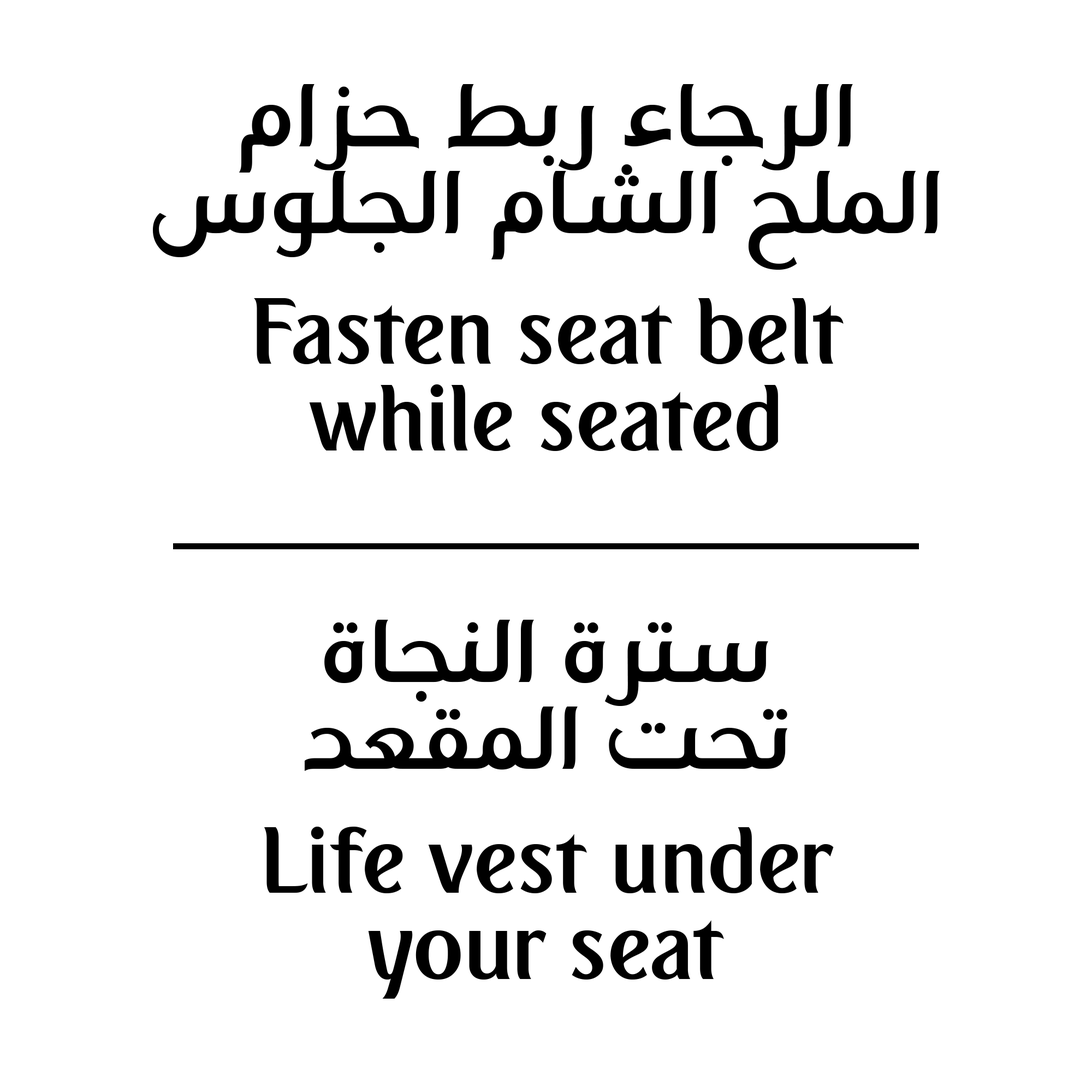
<style>
.page{position:relative;width:1092px;height:1092px;background:#ffffff}
.page>*{position:absolute;margin:0}
.t1{font:91px/86.4px "Emirates-Bold";color:#000000}
</style>
<div class="page">
<p class="t1" style="left:153px;top:84px;width:787px;height:186px;text-align:center">الرجاء ربط حزام<br>الملح الشام الجلوس</p>
<p class="t1" style="left:254px;top:298px;width:590px;height:153px;text-align:center">Fasten seat belt<br>while seated</p>
<p class="t1" style="left:305px;top:620px;width:483px;height:151px;text-align:center">سترة النجاة<br>تحت المقعد</p>
<p class="t1" style="left:264px;top:827px;width:570px;height:172px;text-align:center">Life vest under<br>your seat</p>
</div>
